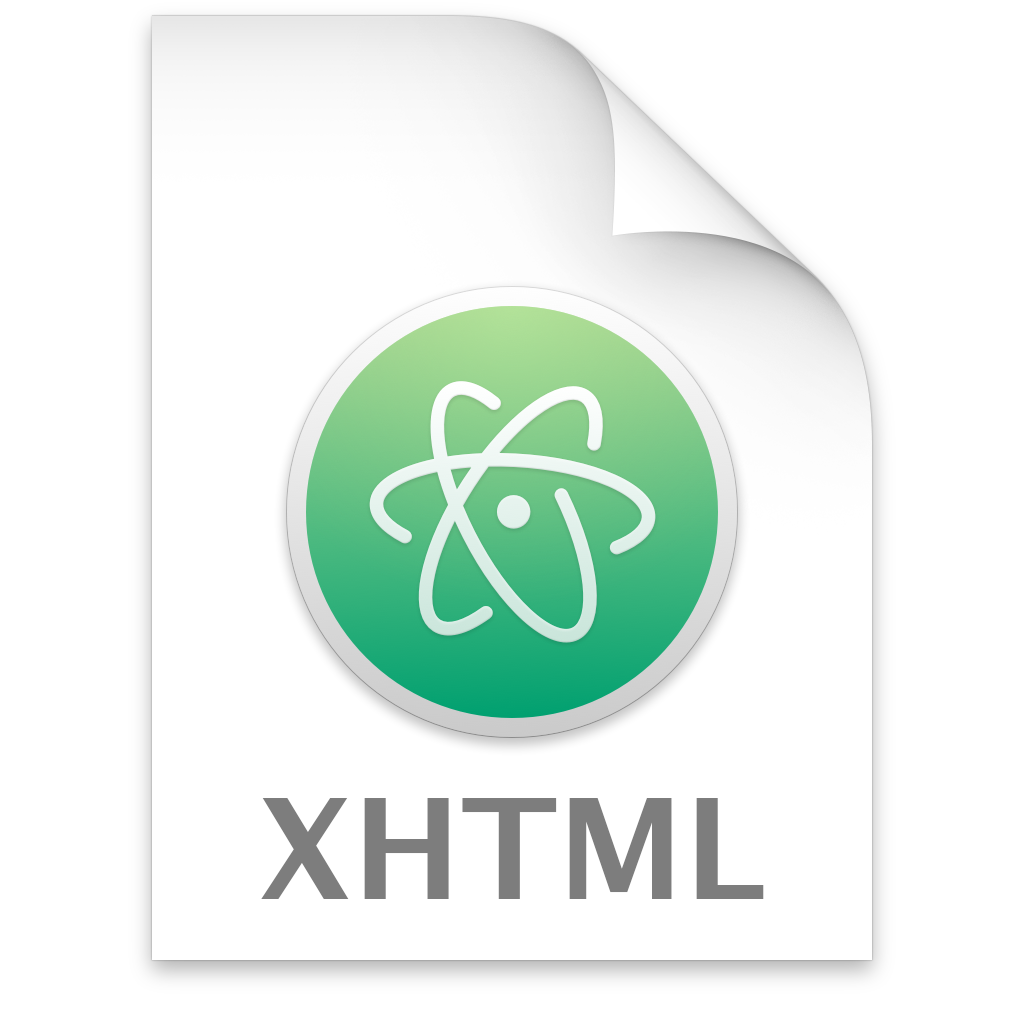
<style>
.page{position:relative;width:1024px;height:1024px;background:#ffffff}
.page>*{position:absolute;margin:0}
.t1{font:140px "LucidaGrande-Bold";color:#7d7d7d}
</style>
<div class="page">
<p class="t1" style="left:261px;top:798px;width:503px;height:101px">XHTML</p>
</div>
